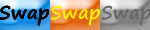
<style>
.page{position:relative;width:150px;height:30px}
.page>*{position:absolute;margin:0}
.t1{font:18.6px "SegoePrint-Bold";color:#000000}
.t2{font:18.6px "SegoePrint-Bold";color:#fff100}
.t3{font:18.6px "SegoePrint-Bold";color:#666666}
</style>
<div class="page">
<p class="t1" style="left:0px;top:5px;width:49px;height:21px">Swap</p>
<p class="t1" style="left:0px;top:5px;width:49px;height:21px">Swap</p>
<p class="t1" style="left:0px;top:5px;width:49px;height:21px">Swap</p>
<p class="t2" style="left:50px;top:5px;width:50px;height:21px">Swap</p>
<p class="t3" style="left:101px;top:5px;width:50px;height:21px">Swap</p>
</div>
